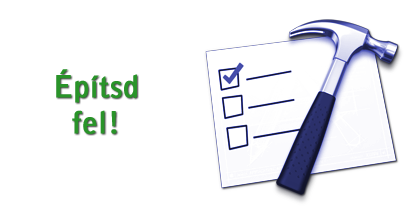
<style>
.page{position:relative;width:420px;height:210px;background:#ffffff}
.page>*{position:absolute;margin:0}
.t1{font:30px "BellGothicStd-Bold";letter-spacing:0.01em;color:#299429;font-weight:bold}
</style>
<div class="page">
<p class="t1" style="left:56px;top:69px;width:81px;height:65px;text-align:center">Építsd<br>fel!</p>
</div>
